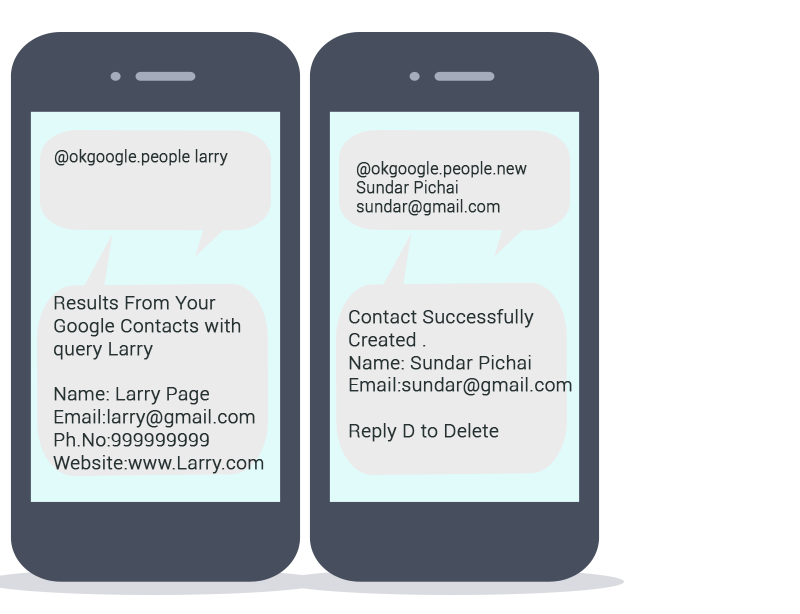
<style>
.page{position:relative;width:800px;height:614px;background:#ffffff}
.page>*{position:absolute;margin:0}
.t1{font:16px "Roboto-Light";color:#263232;font-weight:bold}
.t2{font:19px "Roboto-Light";color:#263232;font-weight:bold}
</style>
<div class="page">
<p class="t1" style="left:54px;top:149px;width:174px;height:17px">@okgoogle.people larry</p>
<p class="t1" style="left:356px;top:161px;width:171px;height:55px">@okgoogle.people.new <br>Sundar Pichai <br>sundar@gmail.com</p>
<p class="t2" style="left:53px;top:295px;width:211px;height:179px">Results From Your <br>Google Contacts with<br>query Larry<br><br>Name: Larry Page<br>Email:larry@gmail.com<br>Ph.No:999999999<br>Website:www.Larry.com</p>
<p class="t2" style="left:349px;top:309px;width:223px;height:133px">Contact Successfully <br>Created .<br>Name: Sundar Pichai<br>Email:sundar@gmail.com<br><br>Reply D to Delete</p>
</div>
